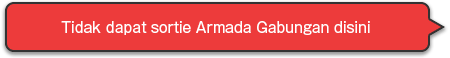
<style>
.page{position:relative;width:450px;height:58px;background:#ed3b3b}
.page>*{position:absolute;margin:0}
.t1{font:14px "GothicMB101Pro-Regular";color:#ffffff}
</style>
<div class="page">
<p class="t1" style="left:61px;top:21px;width:309px;height:14px">Tidak dapat sortie Armada Gabungan disini</p>
</div>
